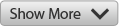
<style>
.page{position:relative;width:119px;height:26px}
.page>*{position:absolute;margin:0}
.t1{font:15px "MyriadPro-Regular";color:#333333}
</style>
<div class="page">
<p class="t1" style="left:10px;top:8px;width:71px;height:11px">Show More</p>
</div>
